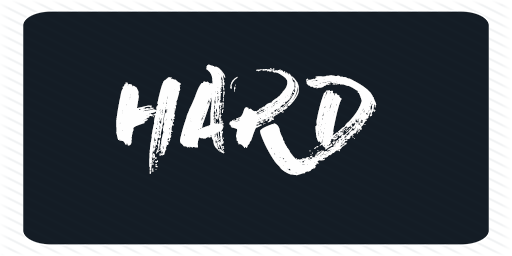
<style>
.page{position:relative;width:512px;height:256px;background:#141c25}
.page>*{position:absolute;margin:0}
.t1{font:98px "DryBrush";color:#fefefe}
</style>
<div class="page">
<p class="t1" style="left:116px;top:64px;width:261px;height:112px">HARD</p>
</div>
